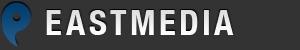
<style>
.page{position:relative;width:300px;height:50px;background:#333333}
.page>*{position:absolute;margin:0}
.t1{font:34.5px "HelveticaNeue-CondensedBold";letter-spacing:0.107em;color:#ffffff}
</style>
<div class="page">
<p class="t1" style="left:46px;top:10px;width:188px;height:25px">EASTMEDIA</p>
</div>
